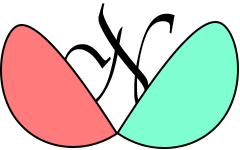
<style>
.page{position:relative;width:240px;height:150px;background:#ffffff}
.page>*{position:absolute;margin:0}
.t1{font:138.9px "Vivaldii";color:#000000;scale:0.6 1}
</style>
<div class="page">
<p class="t1" style="left:61px;top:3px;width:114px;height:107px">N</p>
</div>
